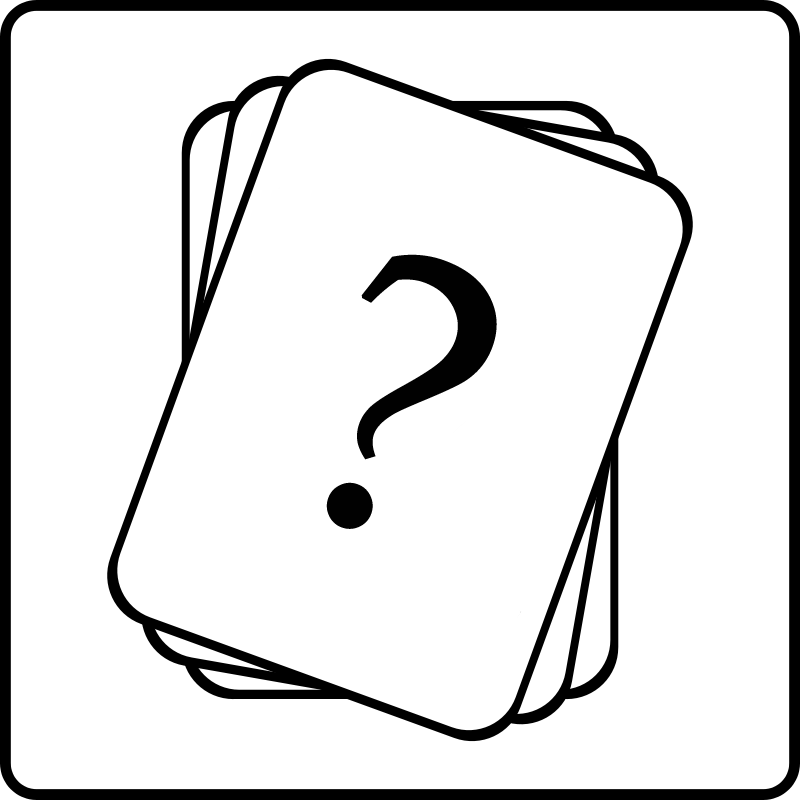
<style>
.page{position:relative;width:800px;height:800px;background:#ffffff}
.page>*{position:absolute;margin:0}
.t1{font:400px "BookAntiqua";color:#010101;text-transform:uppercase}
</style>
<div class="page">
<p class="t1" style="left:326px;top:254px;width:171px;height:275px;rotate:20deg">?</p>
</div>
